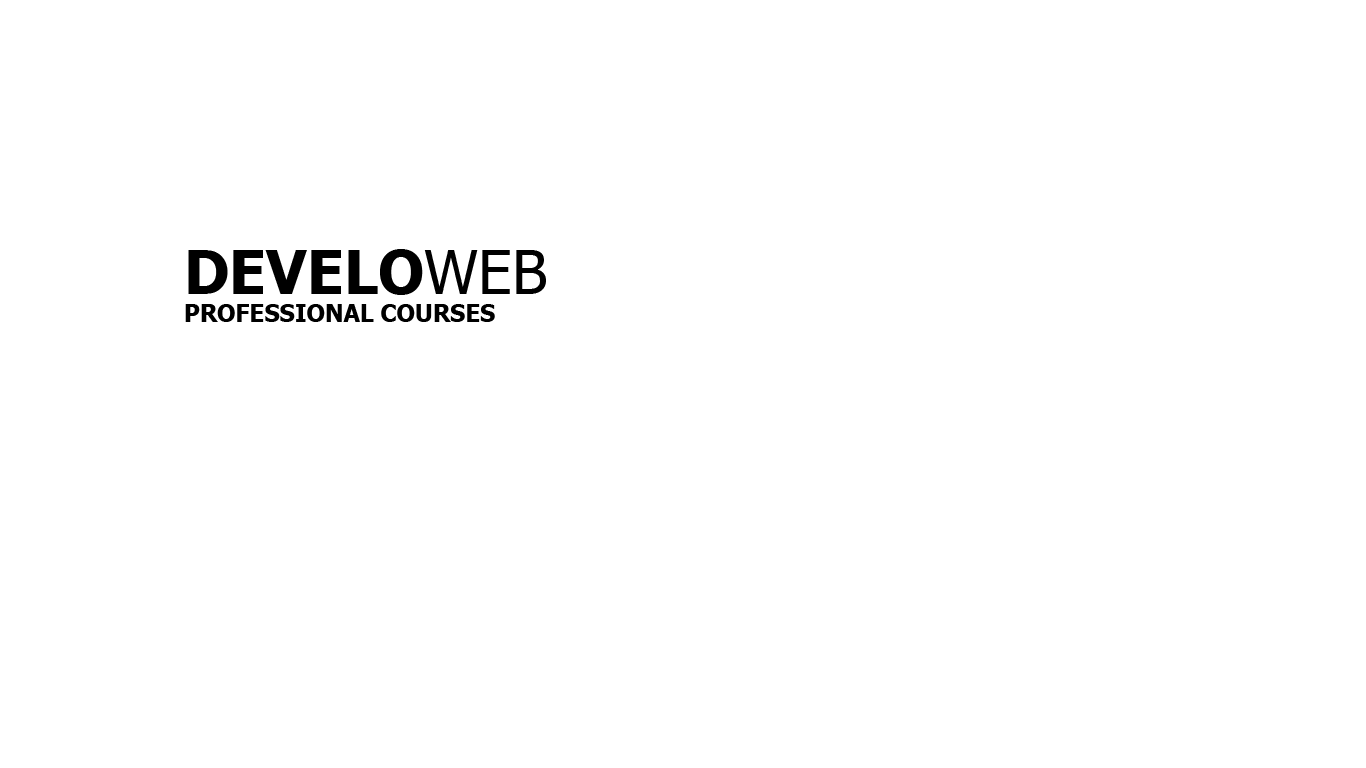
<style>
.page{position:relative;width:1366px;height:768px;background:#ffffff}
.page>*{position:absolute;margin:0}
.t1{font:24px "Tahoma-Bold";color:#000000}
.t2{font:60px "Tahoma-Bold";color:#000000}
.t3{font:60px "Tahoma";color:#000000}
</style>
<div class="page">
<p class="t1" style="left:185px;top:249px;width:361px;height:73px"><span class="t2"><br>DEVELO</span><span class="t3">WEB<br></span>PROFESSIONAL COURSES</p>
</div>
